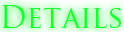
<style>
.page{position:relative;width:124px;height:32px}
.page>*{position:absolute;margin:0}
.t1{font:30px "TrajanPro-Regular";color:#17ff30}
</style>
<div class="page">
<p class="t1" style="left:2px;top:5px;width:119px;height:24px">Details</p>
</div>
